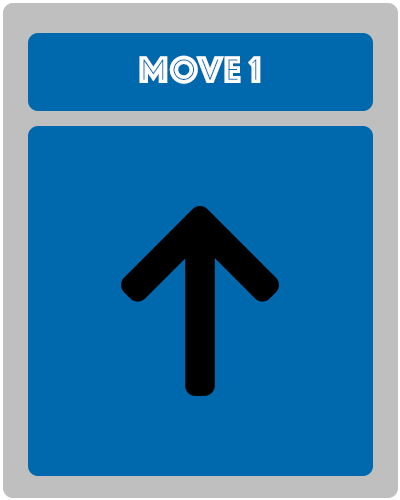
<style>
.page{position:relative;width:400px;height:500px;background:#0069ae}
.page>*{position:absolute;margin:0}
.t1{font:40px "Phosphate-Inline";color:#fefefe}
</style>
<div class="page">
<p class="t1" style="left:139px;top:55px;width:122px;height:29px">MOVE 1</p>
</div>
